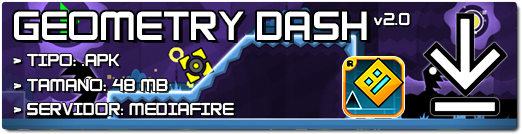
<style>
.page{position:relative;width:522px;height:134px}
.page>*{position:absolute;margin:0}
.t1{font:40.8px "AdventureSubtitles";color:#ffffff}
.t2{font:17.3px "AdventureSubtitles";color:#ffffff}
</style>
<div class="page">
<p class="t1" style="left:14px;top:11px;width:353px;height:29px">GEOMETRY DASH</p>
<p class="t2" style="left:373px;top:12px;width:37px;height:14px">v2.0</p>
<p class="t2" style="left:13px;top:53px;width:107px;height:14px">&gt; TIPO: .APK</p>
<p class="t2" style="left:13px;top:78px;width:155px;height:14px">&gt; TAMANO: 48 MB</p>
<p class="t2" style="left:13px;top:102px;width:221px;height:14px">&gt; SERVIDOR: MEDIAFIRE</p>
</div>
